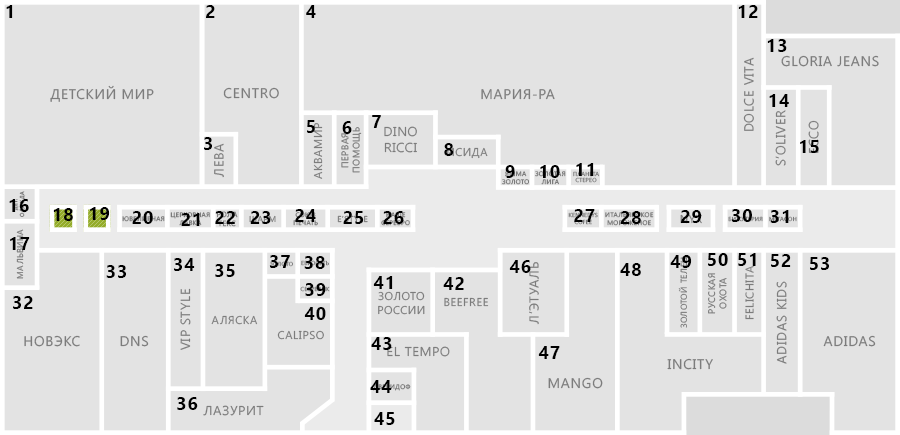
<style>
.page{position:relative;width:900px;height:435px;background:#e3e3e3}
.page>*{position:absolute;margin:0}
.t1{font:18px "SegoeUI-Bold";letter-spacing:0.05em;color:#000000;text-transform:uppercase}
.t2{font:13.1px "SegoeUI";letter-spacing:0.05em;color:#7c7c7c;text-transform:uppercase}
.t3{font:14px "SegoeUI";letter-spacing:0.05em;color:#7c7c7c;text-transform:uppercase}
.t4{font:11.3px "SegoeUI";letter-spacing:0.05em;color:#7c7c7c;text-transform:uppercase}
.t5{font:9.4px "SegoeUI";letter-spacing:0.05em;color:#7c7c7c;text-transform:uppercase}
.t6{font:11.2px "SegoeUI";letter-spacing:0.05em;color:#7c7c7c;text-transform:uppercase}
.t7{font:6.5px "SegoeUI";letter-spacing:0.05em;color:#7c7c7c;text-transform:uppercase}
.t8{font:5.6px "SegoeUI";letter-spacing:0.05em;color:#7c7c7c;text-transform:uppercase}
.t9{font:5.6px "SegoeUI";letter-spacing:0.05em;text-transform:uppercase}
.t10{font:6.5px "SegoeUI";letter-spacing:0.05em;text-transform:uppercase}
.t11{font:8.4px "SegoeUI";letter-spacing:0.05em;text-transform:uppercase}
.t12{font:13px "SegoeUI";letter-spacing:0.05em;color:#7c7c7c;text-transform:uppercase}
.t13{font:9.4px "SegoeUI";letter-spacing:0.05em;text-transform:uppercase}
</style>
<div class="page">
<p class="t1" style="left:6px;top:5px;width:7px;height:13px">1</p>
<p class="t1" style="left:206px;top:5px;width:9px;height:13px">2</p>
<p class="t1" style="left:306px;top:5px;width:10px;height:13px">4</p>
<p class="t1" style="left:738px;top:5px;width:20px;height:13px">12</p>
<p class="t1" style="left:767px;top:39px;width:20px;height:13px">13</p>
<p class="t2" style="left:743px;top:57px;width:11px;height:74px;rotate:-90deg">Dolce vita</p>
<p class="t3" style="left:781px;top:55px;width:98px;height:12px">Gloria jeans</p>
<p class="t3" style="left:50px;top:85px;width:104px;height:17px">Детский мир</p>
<p class="t3" style="left:223px;top:87px;width:56px;height:12px">Centro</p>
<p class="t3" style="left:481px;top:89px;width:74px;height:11px">Мария-ра</p>
<p class="t1" style="left:769px;top:94px;width:20px;height:13px">14</p>
<p class="t2" style="left:775px;top:110px;width:11px;height:56px;rotate:-90deg">s’oliver</p>
<p class="t1" style="left:307px;top:120px;width:8px;height:13px">5</p>
<p class="t4" style="left:313px;top:123px;width:10px;height:56px;rotate:-90deg">Аквамир</p>
<p class="t1" style="left:342px;top:121px;width:10px;height:13px">6</p>
<p class="t1" style="left:372px;top:115px;width:9px;height:13px">7</p>
<p class="t2" style="left:384px;top:126px;width:33px;height:27px;text-align:center">Dino<br>Ricci</p>
<p class="t2" style="left:808px;top:120px;width:11px;height:33px;rotate:-90deg">Ecco</p>
<p class="t1" style="left:204px;top:137px;width:8px;height:13px">3</p>
<p class="t5" style="left:341px;top:127px;width:21px;height:46px;text-align:center;rotate:-90deg">Первая<br>помощь</p>
<p class="t2" style="left:214px;top:143px;width:10px;height:35px;rotate:-90deg">Лева</p>
<p class="t1" style="left:444px;top:143px;width:10px;height:13px">8</p>
<p class="t6" style="left:447px;top:147px;width:41px;height:12px">Исида</p>
<p class="t1" style="left:800px;top:140px;width:19px;height:13px">15</p>
<p class="t7" style="left:502px;top:171px;width:27px;height:14px;text-align:center">Яшма<br>золото</p>
<p class="t1" style="left:505px;top:165px;width:10px;height:13px">9</p>
<p class="t7" style="left:535px;top:171px;width:31px;height:14px;text-align:center">Золотая<br>лига</p>
<p class="t1" style="left:540px;top:165px;width:20px;height:13px">10</p>
<p class="t8" style="left:573px;top:171px;width:27px;height:12px;text-align:center">Планета<br>стерео</p>
<p class="t1" style="left:576px;top:163px;width:18px;height:13px">11</p>
<p class="t9" style="left:13px;top:191px;width:13px;height:26px;text-align:center;rotate:-90deg">Дет.<br>одежда</p>
<p class="t1" style="left:9px;top:199px;width:20px;height:13px">16</p>
<p class="t1" style="left:53px;top:208px;width:20px;height:13px">18</p>
<p class="t1" style="left:90px;top:207px;width:20px;height:13px">19</p>
<p class="t1" style="left:295px;top:209px;width:21px;height:13px">24</p>
<p class="t1" style="left:574px;top:209px;width:21px;height:13px">27</p>
<p class="t1" style="left:732px;top:209px;width:20px;height:13px">30</p>
<p class="t1" style="left:132px;top:211px;width:21px;height:13px">20</p>
<p class="t7" style="left:170px;top:212px;width:40px;height:14px;text-align:center">Церковная<br>лавка</p>
<p class="t1" style="left:181px;top:213px;width:19px;height:13px">21</p>
<p class="t1" style="left:215px;top:211px;width:20px;height:13px">22</p>
<p class="t1" style="left:250px;top:211px;width:21px;height:13px">23</p>
<p class="t1" style="left:343px;top:211px;width:21px;height:13px">25</p>
<p class="t10" style="left:381px;top:212px;width:29px;height:14px;text-align:center">Наше<br>серебро</p>
<p class="t1" style="left:383px;top:211px;width:21px;height:13px">26</p>
<p class="t9" style="left:568px;top:212px;width:30px;height:13px;text-align:center">Kennedys<br>cofee</p>
<p class="t7" style="left:605px;top:212px;width:49px;height:14px;text-align:center">Итальянское<br>мороженое</p>
<p class="t1" style="left:620px;top:211px;width:21px;height:13px">28</p>
<p class="t1" style="left:681px;top:210px;width:21px;height:13px">29</p>
<p class="t1" style="left:770px;top:210px;width:19px;height:13px">31</p>
<p class="t11" style="left:16px;top:229px;width:8px;height:50px;rotate:-90deg">Мальвина</p>
<p class="t1" style="left:10px;top:237px;width:20px;height:13px">17</p>
<p class="t1" style="left:270px;top:255px;width:20px;height:13px">37</p>
<p class="t1" style="left:304px;top:256px;width:21px;height:13px">38</p>
<p class="t1" style="left:670px;top:255px;width:22px;height:13px">49</p>
<p class="t11" style="left:678px;top:256px;width:11px;height:72px;rotate:-90deg">Золотой телец</p>
<p class="t1" style="left:708px;top:253px;width:20px;height:13px">50</p>
<p class="t1" style="left:738px;top:253px;width:18px;height:13px">51</p>
<p class="t1" style="left:771px;top:254px;width:20px;height:13px">52</p>
<p class="t1" style="left:810px;top:257px;width:19px;height:13px">53</p>
<p class="t1" style="left:106px;top:265px;width:20px;height:13px">33</p>
<p class="t1" style="left:174px;top:258px;width:21px;height:13px">34</p>
<p class="t1" style="left:215px;top:264px;width:20px;height:13px">35</p>
<p class="t1" style="left:509px;top:260px;width:22px;height:13px">46</p>
<p class="t12" style="left:529px;top:262px;width:10px;height:63px;rotate:-90deg">Л’ЭТУАЛЬ</p>
<p class="t1" style="left:620px;top:263px;width:21px;height:13px">48</p>
<p class="t4" style="left:745px;top:265px;width:9px;height:55px;rotate:-90deg">Felichita</p>
<p class="t1" style="left:373px;top:276px;width:20px;height:13px">41</p>
<p class="t1" style="left:443px;top:277px;width:21px;height:13px">42</p>
<p class="t13" style="left:708px;top:273px;width:19px;height:41px;text-align:center;rotate:-90deg">Русская<br>охота</p>
<p class="t2" style="left:776px;top:281px;width:11px;height:83px;rotate:-90deg">Adidas kids</p>
<p class="t2" style="left:180px;top:288px;width:11px;height:62px;rotate:-90deg">Vip style</p>
<p class="t1" style="left:305px;top:283px;width:21px;height:13px">39</p>
<p class="t6" style="left:378px;top:291px;width:47px;height:24px;text-align:center">Золото<br>России</p>
<p class="t1" style="left:13px;top:296px;width:20px;height:13px">32</p>
<p class="t6" style="left:444px;top:297px;width:45px;height:10px">Beefree</p>
<p class="t6" style="left:211px;top:315px;width:47px;height:10px">Аляска</p>
<p class="t1" style="left:304px;top:307px;width:22px;height:13px">40</p>
<p class="t3" style="left:24px;top:335px;width:56px;height:12px">Новэкс</p>
<p class="t3" style="left:120px;top:335px;width:29px;height:12px">Dns</p>
<p class="t6" style="left:277px;top:330px;width:47px;height:10px">Calipso</p>
<p class="t1" style="left:371px;top:337px;width:21px;height:13px">43</p>
<p class="t3" style="left:823px;top:335px;width:53px;height:12px">Adidas</p>
<p class="t2" style="left:387px;top:346px;width:63px;height:11px">El tempo</p>
<p class="t1" style="left:538px;top:346px;width:22px;height:13px">47</p>
<p class="t3" style="left:667px;top:358px;width:46px;height:12px">INCITY</p>
<p class="t3" style="left:548px;top:377px;width:55px;height:12px">Mango</p>
<p class="t1" style="left:370px;top:380px;width:22px;height:13px">44</p>
<p class="t10" style="left:373px;top:384px;width:38px;height:7px">Дверидоф</p>
<p class="t1" style="left:177px;top:397px;width:21px;height:13px">36</p>
<p class="t2" style="left:203px;top:405px;width:61px;height:11px">Лазурит</p>
<p class="t1" style="left:374px;top:412px;width:21px;height:13px">45</p>
</div>
